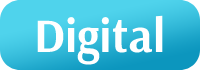
<style>
.page{position:relative;width:200px;height:70px}
.page>*{position:absolute;margin:0}
.t1{font:48px "Arsenal-Bold";color:#ffffff}
</style>
<div class="page">
<p class="t1" style="left:37px;top:15px;width:126px;height:50px">Digital</p>
</div>
